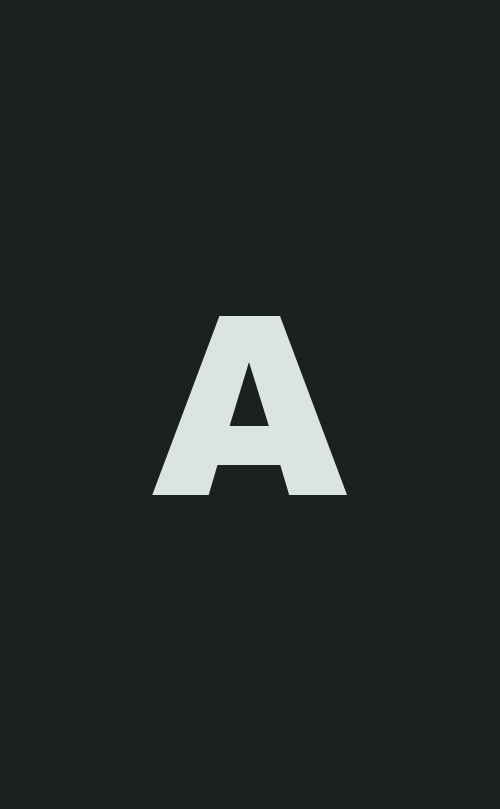
<style>
.page{position:relative;width:500px;height:809px;background:#1b2021}
.page>*{position:absolute;margin:0}
.t1{font:250px "Arial-Black";letter-spacing:0.075em;color:#dce4e3}
</style>
<div class="page">
<p class="t1" style="left:152px;top:316px;width:196px;height:179px">A</p>
</div>
